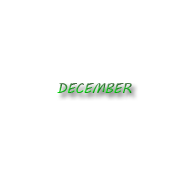
<style>
.page{position:relative;width:182px;height:182px;background:#ffffff}
.page>*{position:absolute;margin:0}
.t1{font:14px "MVBoli";text-transform:uppercase}
</style>
<div class="page">
<p class="t1" style="left:57px;top:83px;width:75px;height:10px">december</p>
</div>
